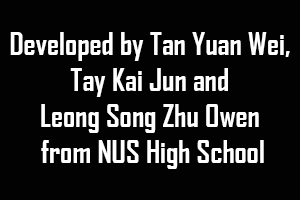
<style>
.page{position:relative;width:300px;height:200px;background:#020202}
.page>*{position:absolute;margin:0}
.t1{font:30px "AgencyFB-Bold";color:#ffffff}
</style>
<div class="page">
<p class="t1" style="left:10px;top:32px;width:280px;height:137px;text-align:center">Developed by Tan Yuan Wei, <br>Tay Kai Jun and <br>Leong Song Zhu Owen <br>from NUS High School</p>
</div>
